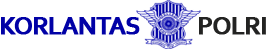
<style>
.page{position:relative;width:272px;height:50px;background:#ffffff}
.page>*{position:absolute;margin:0}
.t1{font:26px "Corbel-Bold";letter-spacing:-0.05em;color:#0101a6;text-transform:uppercase;font-weight:bold}
.t2{font:26px "Corbel-Bold";letter-spacing:-0.05em;color:#232322;text-transform:uppercase;font-weight:bold}
</style>
<div class="page">
<p class="t1" style="left:1px;top:17px;width:139px;height:18px">Korlantas</p>
<p class="t2" style="left:199px;top:17px;width:67px;height:18px">POLRI</p>
</div>
